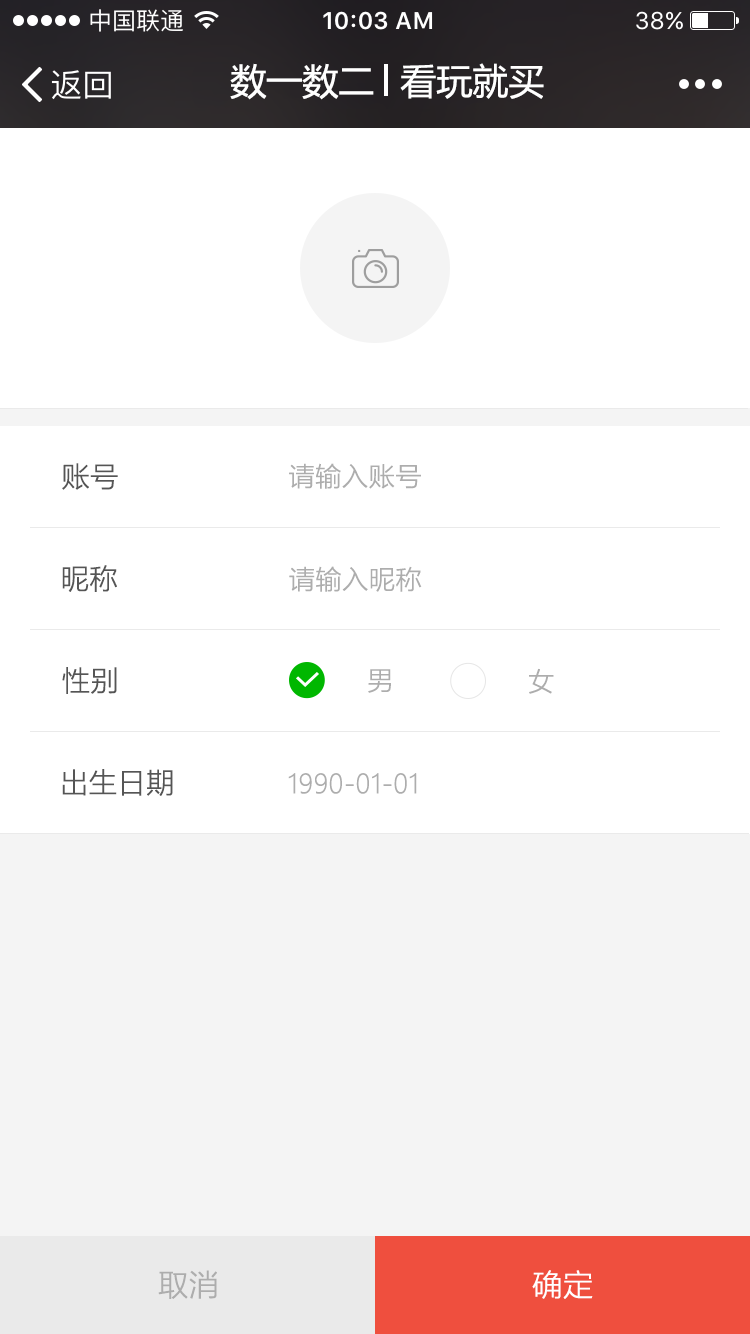
<style>
.page{position:relative;width:750px;height:1334px;background:#ffffff}
.page>*{position:absolute;margin:0}
.t1{font:36px "MicrosoftYaHei";color:#ffffff}
.t2{font:28px "MicrosoftYaHeiLight";color:#555555;font-weight:bold}
.t3{font:26px "MicrosoftYaHeiLight";color:#adadad;font-weight:bold}
.t4{font:30px "MicrosoftYaHeiLight";color:#adadad;font-weight:bold}
.t5{font:30px "MicrosoftYaHeiLight";color:#ffffff;font-weight:bold}
</style>
<div class="page">
<p class="t1" style="left:230px;top:63px;width:144px;height:37px">数一数二</p>
<p class="t1" style="left:400px;top:63px;width:144px;height:36px">看玩就买</p>
<p class="t2" style="left:62px;top:463px;width:56px;height:27px">账号</p>
<p class="t3" style="left:289px;top:463px;width:132px;height:26px">请输入账号</p>
<p class="t2" style="left:62px;top:565px;width:55px;height:27px">昵称</p>
<p class="t3" style="left:289px;top:566px;width:133px;height:26px">请输入昵称</p>
<p class="t2" style="left:62px;top:667px;width:55px;height:27px">性别</p>
<p class="t3" style="left:368px;top:669px;width:23px;height:24px">男</p>
<p class="t3" style="left:529px;top:668px;width:25px;height:26px">女</p>
<p class="t2" style="left:62px;top:769px;width:111px;height:27px">出生日期</p>
<p class="t3" style="left:288px;top:773px;width:129px;height:21px">1990-01-01</p>
<p class="t4" style="left:158px;top:1270px;width:59px;height:29px">取消</p>
<p class="t5" style="left:532px;top:1270px;width:61px;height:29px">确定</p>
</div>
